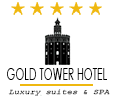
<style>
.page{position:relative;width:114px;height:100px;background:#ffffff}
.page>*{position:absolute;margin:0}
.t1{font:15.7px "CenturyGothic";color:#000000;scale:0.65 1}
.t2{font:7px "CourierNewPS-ItalicMT";color:#000000;scale:1.26 1}
</style>
<div class="page">
<p class="t1" style="left:7px;top:68px;width:100px;height:12px">GOLD TOWER HOTEL</p>
<p class="t2" style="left:8px;top:89px;width:102px;height:7px">Luxury suites &amp; SPA</p>
</div>
